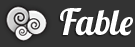
<style>
.page{position:relative;width:135px;height:47px;background:#333333}
.page>*{position:absolute;margin:0}
.t1{font:36px "Lobster1.4";letter-spacing:-0.01em;color:#ffffff}
</style>
<div class="page">
<p class="t1" style="left:60px;top:8px;width:73px;height:28px">Fable</p>
</div>
